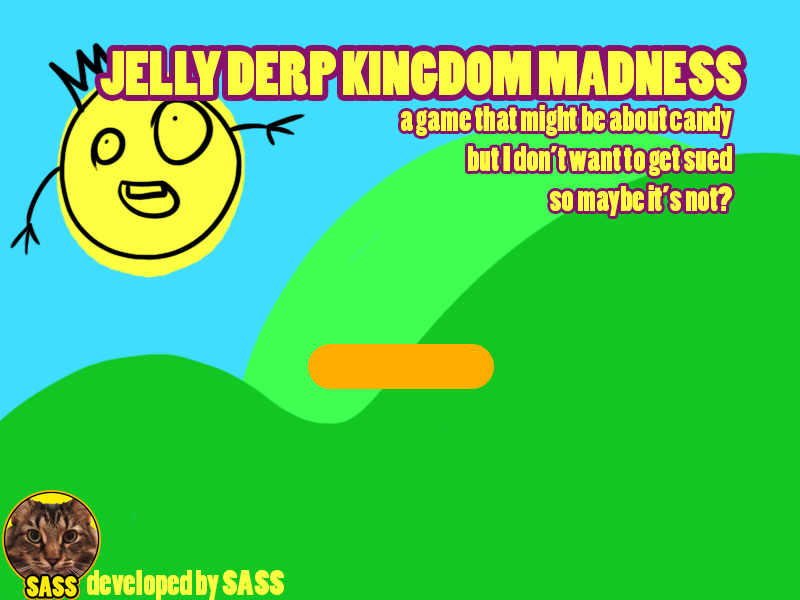
<style>
.page{position:relative;width:800px;height:600px;background:#12c723}
.page>*{position:absolute;margin:0}
.t1{font:58.3px "PoplarStd";color:#fdff40}
.t2{font:33.3px "PoplarStd";color:#fdff40}
</style>
<div class="page">
<p class="t1" style="left:100px;top:51px;width:641px;height:44px">JELLY DERP KINGDOM MADNESS</p>
<p class="t2" style="left:401px;top:105px;width:331px;height:111px;text-align:right">a game that might be about candy<br>but I don’t want to get sued<br>so maybe it’s not?</p>
<p class="t2" style="left:87px;top:570px;width:198px;height:30px">developed by SASS</p>
</div>
